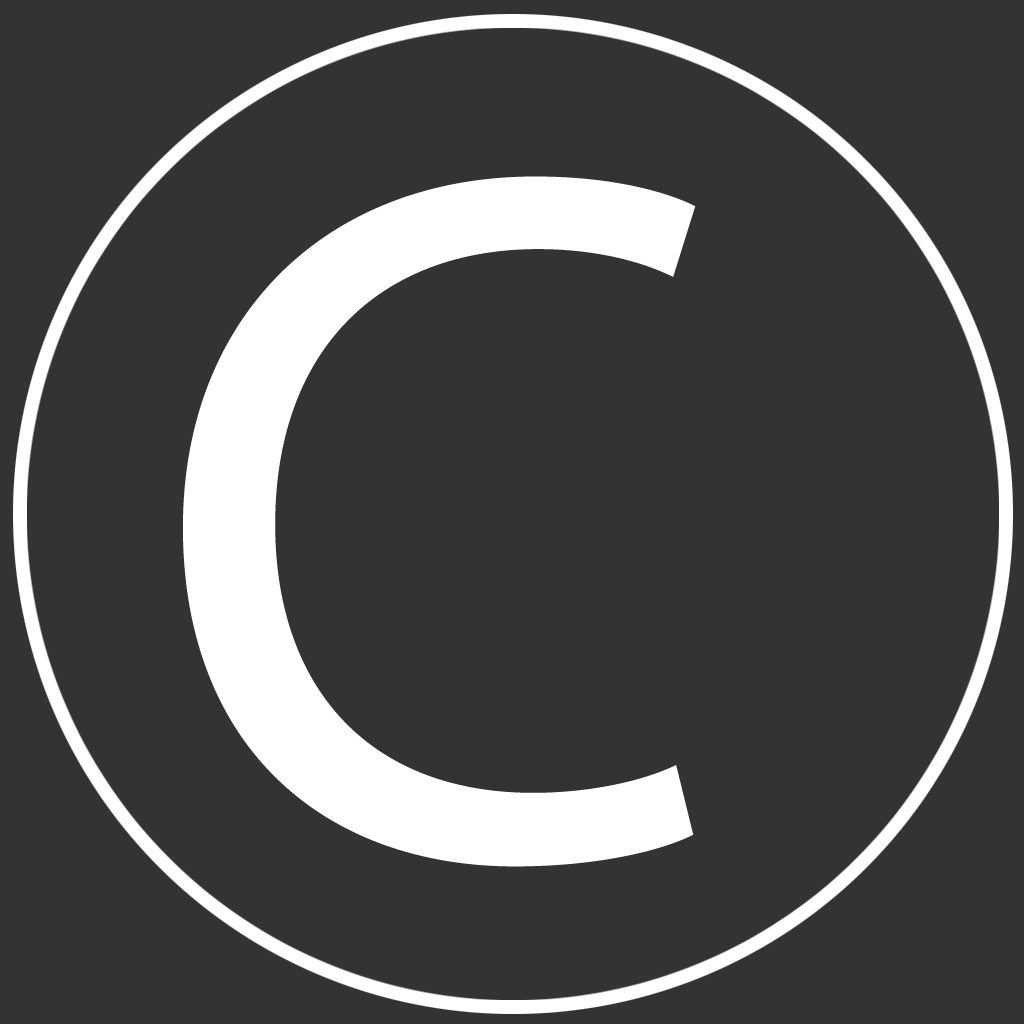
<style>
.page{position:relative;width:1024px;height:1024px;background:#333333}
.page>*{position:absolute;margin:0}
.t1{font:990.9px "MyriadPro-Regular";color:#ffffff}
</style>
<div class="page">
<p class="t1" style="left:183px;top:176px;width:513px;height:691px">C</p>
</div>
